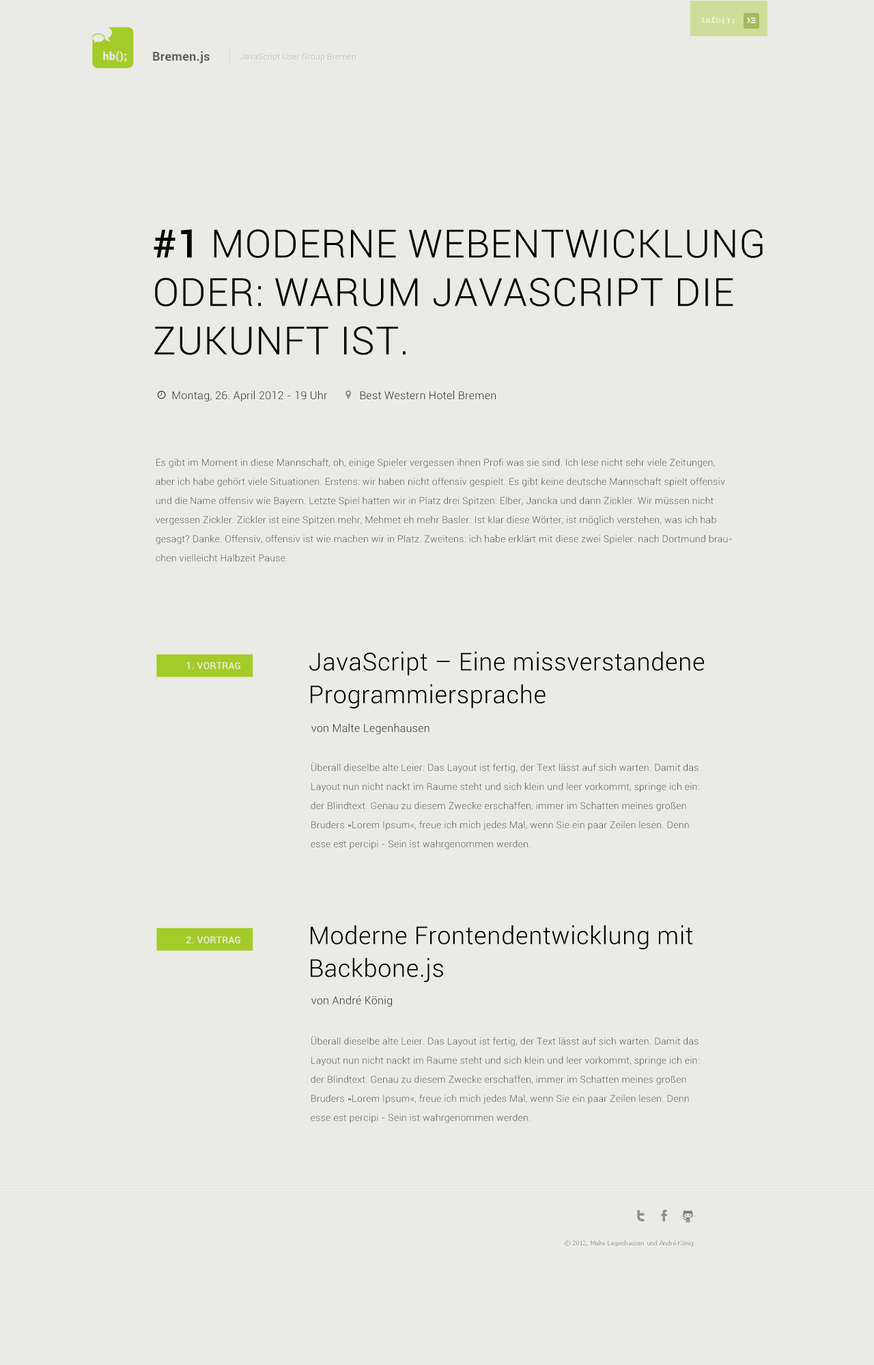
<style>
.page{position:relative;width:874px;height:1365px;background:#eaeae6}
.page>*{position:absolute;margin:0}
.t1{font:8.2px "Courier";letter-spacing:0.02em;color:#ffffff}
.t2{font:10.9px "Roboto-Black";letter-spacing:0.02em;color:#e9e9e9}
.t3{font:12.3px "Roboto-Bold";letter-spacing:0.02em;color:#5e5e5c}
.t4{font:8.2px "Roboto-Light";letter-spacing:0.02em}
.t5{font:38.9px/48.5px "Roboto-Light";letter-spacing:0.02em;color:#000000}
.t6{font:38.9px/48.5px "Roboto-Medium";letter-spacing:0.02em;color:#000000}
.t7{font:10.9px "Roboto-Light";letter-spacing:0.02em;color:#2e2e2e}
.t8{font:10.9px "RaphaelIcons";letter-spacing:0.02em;color:#2e2e2e}
.t9{font:9.6px/19.1px "Roboto-Light";letter-spacing:0.02em;color:#585757}
.t10{font:24.6px/32.8px "Roboto-Light";letter-spacing:0.02em;color:#000000}
.t11{font:9.6px "Roboto-Medium";letter-spacing:0.02em;color:#eaeae6}
.t12{font:20.5px "ModernPictograms";letter-spacing:0.02em;color:#8f8f8f}
.t13{font:19.1px "ModernPictograms";letter-spacing:0.02em;color:#8f8f8f}
.t14{font:6.1px "Tahoma";letter-spacing:0.02em;color:#a4a4a1}
</style>
<div class="page">
<p class="t1" style="left:701px;top:17px;width:33px;height:8px">info();</p>
<p class="t2" style="left:103px;top:51px;width:24px;height:11px">hb();</p>
<p class="t3" style="left:153px;top:51px;width:57px;height:12px">Bremen.js</p>
<p class="t4" style="left:240px;top:53px;width:116px;height:8px">JavaScript User Group Bremen</p>
<p class="t5" style="left:154px;top:229px;width:608px;height:126px"><span class="t6">#1 </span>MODERNE WEBENTWICKLUNG ODER: WARUM JAVASCRIPT DIE ZUKUNFT IST.</p>
<p class="t7" style="left:157px;top:390px;width:338px;height:12px"><span class="t8">4</span>  Montag, 26. April 2012 - 19 Uhr           Best Western Hotel Bremen</p>
<p class="t9" style="left:156px;top:459px;width:576px;height:103px">Es gibt im Moment in diese Mannschaft, oh, einige Spieler vergessen ihnen Profi was sie sind. Ich lese nicht sehr viele Zeitungen, aber ich habe gehört viele Situationen. Erstens: wir haben nicht offensiv gespielt. Es gibt keine deutsche Mannschaft spielt offensiv und die Name offensiv wie Bayern. Letzte Spiel hatten wir in Platz drei Spitzen: Elber, Jancka und dann Zickler. Wir müssen nicht vergessen Zickler. Zickler ist eine Spitzen mehr, Mehmet eh mehr Basler. Ist klar diese Wörter, ist möglich verstehen, was ich hab gesagt? Danke. Offensiv, offensiv ist wie machen wir in Platz. Zweitens: ich habe erklärt mit diese zwei Spieler: nach Dortmund brauchen vielleicht Halbzeit Pause.</p>
<p class="t10" style="left:309px;top:651px;width:395px;height:57px">JavaScript – Eine missverstandene Programmiersprache</p>
<p class="t11" style="left:186px;top:662px;width:54px;height:8px">1. VORTRAG</p>
<p class="t7" style="left:311px;top:723px;width:118px;height:11px">von Malte Legenhausen</p>
<p class="t9" style="left:311px;top:762px;width:388px;height:88px">Überall dieselbe alte Leier. Das Layout ist fertig, der Text lässt auf sich warten. Damit das Layout nun nicht nackt im Raume steht und sich klein und leer vorkommt, springe ich ein: der Blindtext. Genau zu diesem Zwecke erschaffen, immer im Schatten meines großen Bruders »Lorem Ipsum«, freue ich mich jedes Mal, wenn Sie ein paar Zeilen lesen. Denn esse est percipi - Sein ist wahrgenommen werden.</p>
<p class="t10" style="left:311px;top:925px;width:382px;height:57px">Moderne Frontendentwicklung mit Backbone.js</p>
<p class="t11" style="left:186px;top:936px;width:54px;height:8px">2. VORTRAG</p>
<p class="t7" style="left:311px;top:995px;width:81px;height:12px">von André König</p>
<p class="t9" style="left:311px;top:1036px;width:388px;height:87px">Überall dieselbe alte Leier. Das Layout ist fertig, der Text lässt auf sich warten. Damit das Layout nun nicht nackt im Raume steht und sich klein und leer vorkommt, springe ich ein: der Blindtext. Genau zu diesem Zwecke erschaffen, immer im Schatten meines großen Bruders »Lorem Ipsum«, freue ich mich jedes Mal, wenn Sie ein paar Zeilen lesen. Denn esse est percipi - Sein ist wahrgenommen werden.</p>
<p class="t12" style="left:637px;top:1209px;width:30px;height:13px">T  <span class="t13">F</span></p>
<p class="t14" style="left:564px;top:1240px;width:129px;height:7px">© 2012, Malte Legenhausen und André König</p>
</div>
